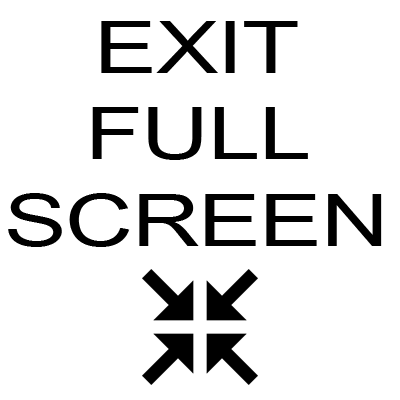
<style>
.page{position:relative;width:400px;height:400px;background:#ffffff}
.page>*{position:absolute;margin:0}
.t1{font:72px "ArialMT";letter-spacing:-0.011em;color:#000000;scale:1.3 1}
</style>
<div class="page">
<p class="t1" style="left:8px;top:21px;width:374px;height:226px;text-align:center">EXIT<br>FULL<br>SCREEN</p>
</div>
